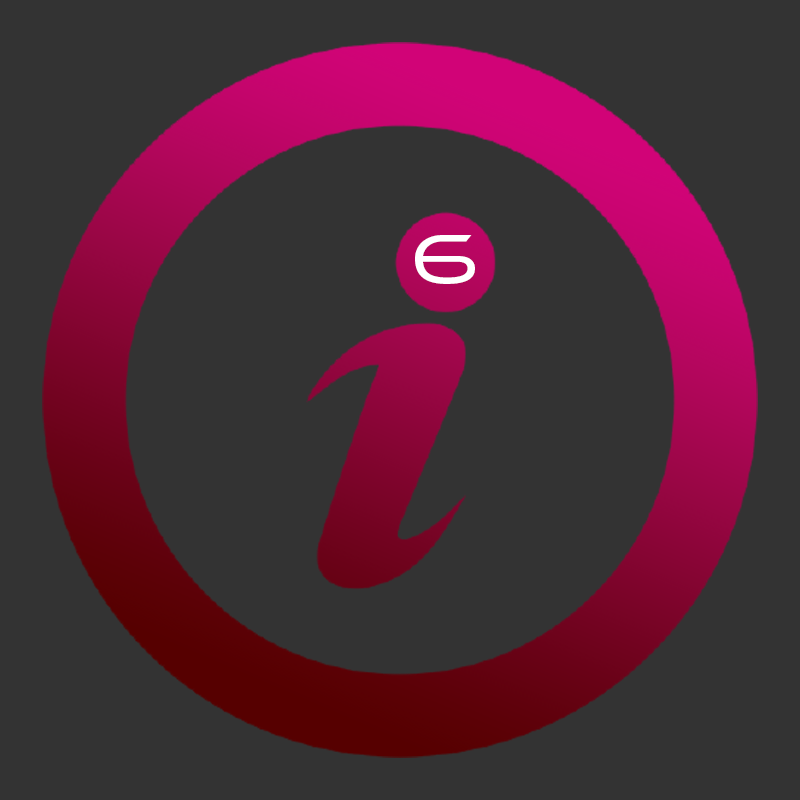
<style>
.page{position:relative;width:800px;height:800px;background:#333333}
.page>*{position:absolute;margin:0}
.t1{font:72px "EthnocentricLt-Regular";letter-spacing:0.15em;color:#ffffff}
</style>
<div class="page">
<p class="t1" style="left:415px;top:235px;width:60px;height:49px">6</p>
</div>
